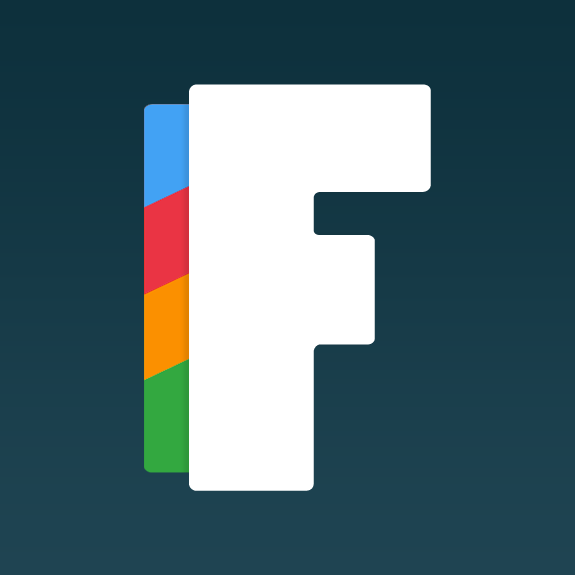
<style>
.page{position:relative;width:575px;height:575px;background:#ffffff}
.page>*{position:absolute;margin:0}
.t1{font:541.3px "PoplarStd";color:#ffffff;scale:1.16 1}
</style>
<div class="page">
<p class="t1" style="left:189px;top:84px;width:242px;height:407px">F</p>
</div>
